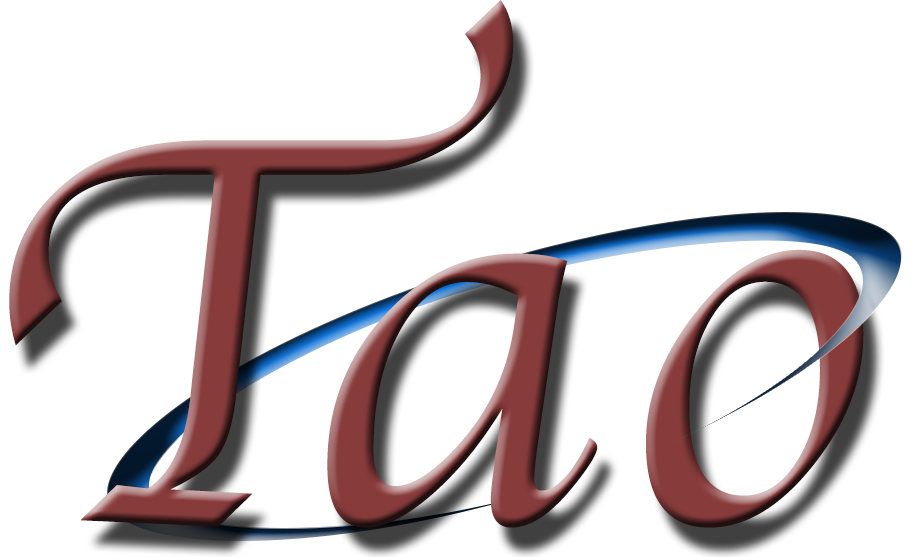
<style>
.page{position:relative;width:914px;height:557px;background:#ffffff}
.page>*{position:absolute;margin:0}
.t1{font:578.2px "Apple-Chancery";letter-spacing:-0.05em}
.t2{font:578.2px "Apple-Chancery";letter-spacing:0.05em}
.t3{font:578.2px "Apple-Chancery"}
</style>
<div class="page">
<p class="t1" style="left:9px;top:0px;width:855px;height:528px">T<span class="t2">a</span><span class="t3">o</span></p>
</div>
